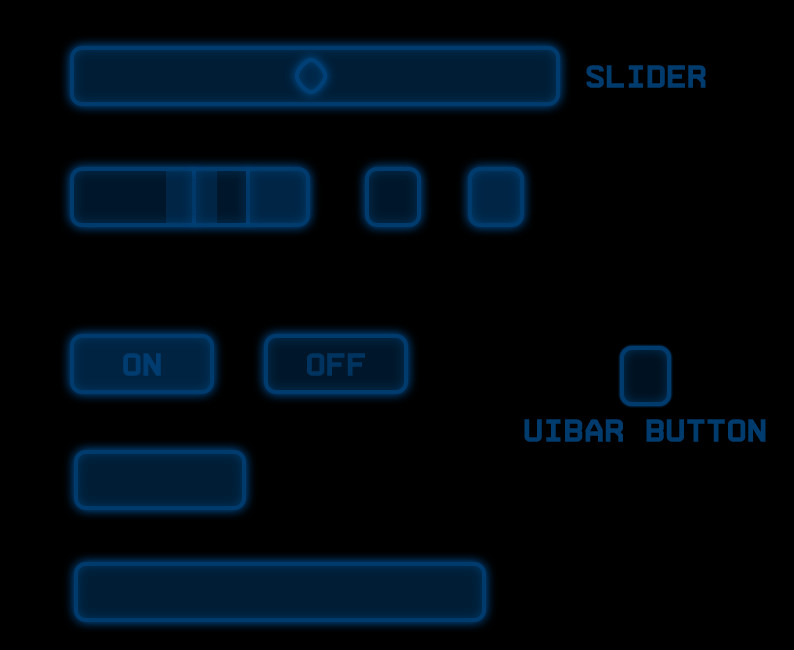
<style>
.page{position:relative;width:794px;height:650px;background:#000000}
.page>*{position:absolute;margin:0}
.t1{font:32px "0Arame-Mono-Bold";color:#00526f;text-transform:uppercase;scale:1.06 1}
.t2{font:32px "0Arame-Mono-Bold";color:#003460;text-transform:uppercase;scale:1.06 1}
</style>
<div class="page">
<p class="t1" style="left:586px;top:65px;width:120px;height:23px">SLIDER</p>
<p class="t1" style="left:123px;top:353px;width:38px;height:23px">ON</p>
<p class="t2" style="left:307px;top:353px;width:58px;height:23px">OFF</p>
<p class="t1" style="left:524px;top:419px;width:242px;height:23px">UIBar button</p>
</div>
